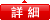
<style>
.page{position:relative;width:50px;height:20px;background:#ffffff}
.page>*{position:absolute;margin:0}
.t1{font:12px "SimHei";letter-spacing:-0.06em;color:#ffffff;text-transform:uppercase}
</style>
<div class="page">
<p class="t1" style="left:11px;top:6px;width:28px;height:12px">詳 細</p>
</div>
